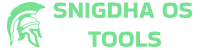
<style>
.page{position:relative;width:200px;height:50px;background:#ffffff}
.page>*{position:absolute;margin:0}
.t1{font:24px "BakbakOne-Regular";color:#74e291}
</style>
<div class="page">
<p class="t1" style="left:53px;top:2px;width:140px;height:45px">SNIGDHA OS<br>TOOLS</p>
</div>
